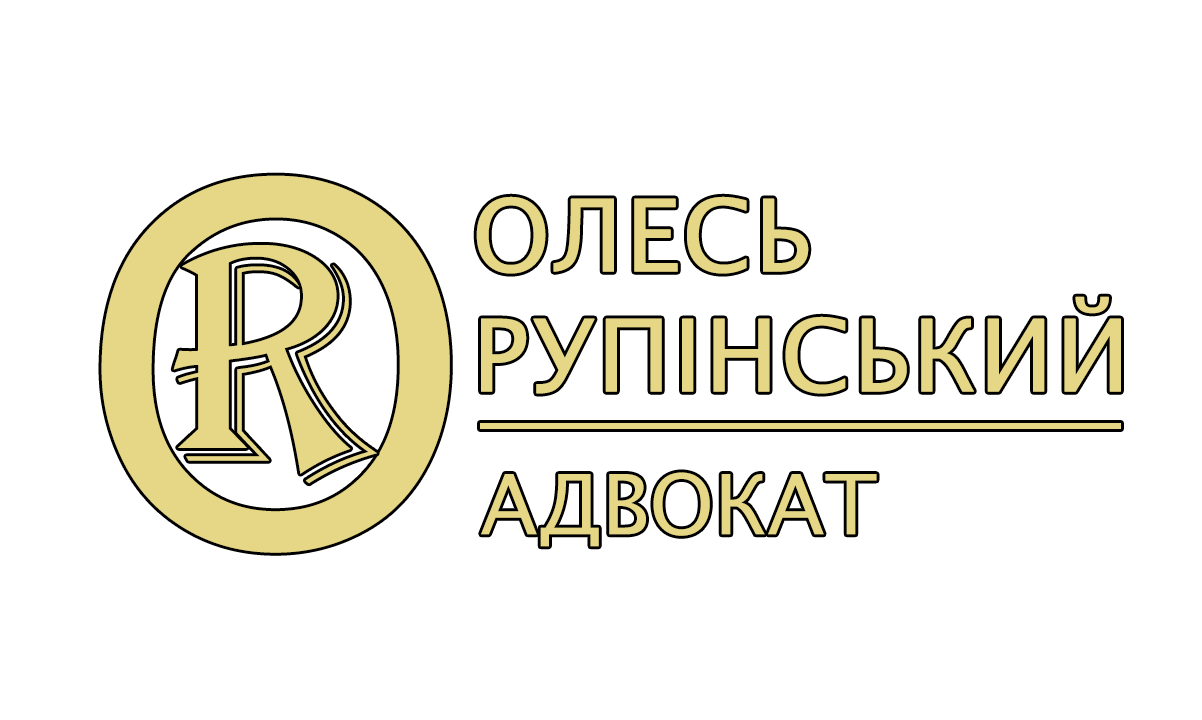
<style>
.page{position:relative;width:1202px;height:720px;background:#ffffff}
.page>*{position:absolute;margin:0}
.t1{font:508.3px "ArialMT";color:#e6d786}
.t2{font:100px "LucidaSans";color:#e6d786;font-weight:bold}
</style>
<div class="page">
<p class="t1" style="left:101px;top:175px;width:349px;height:378px">O</p>
<p class="t2" style="left:476px;top:196px;width:645px;height:198px">ОЛЕСЬ <br>РУПІНСЬКИЙ</p>
</div>
